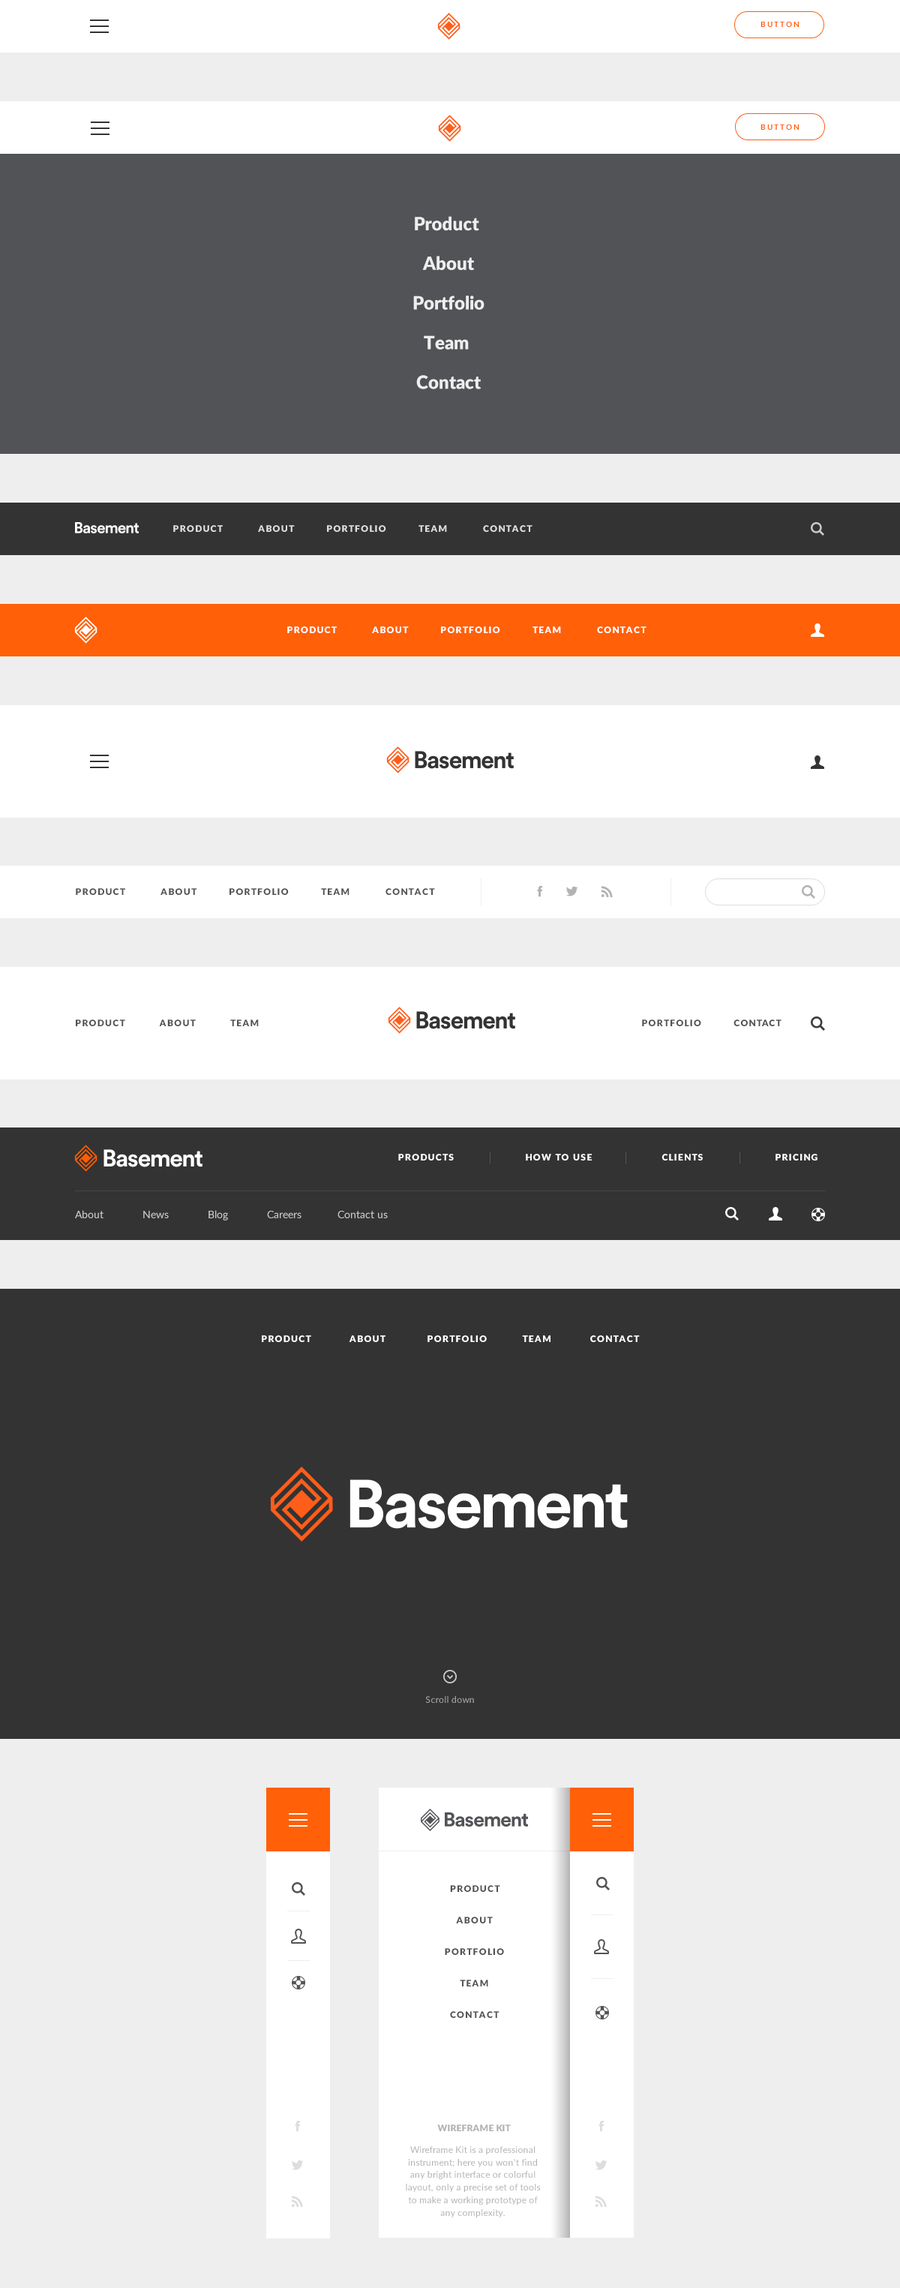
<style>
.page{position:relative;width:900px;height:2288px;background:#eeeeee}
.page>*{position:absolute;margin:0}
.t1{font:7.5px "Lato-Bold";letter-spacing:0.2em;color:#ff5c00}
.t2{font:7.5px "Lato-Bold";letter-spacing:0.2em;color:#ff5f00}
.t3{font:18px/39.6px "Lato-Black";color:#eeeeee}
.t4{font:9px "Lato-Black";letter-spacing:0.1em;color:#dddddd}
.t5{font:9px "Lato-Black";letter-spacing:0.1em;color:#ffffff}
.t6{font:9px "Lato-Black";letter-spacing:0.1em;color:#515356}
.t7{font:9px "Lato-Black";letter-spacing:0.1em;color:#515254}
.t8{font:10.5px "Lato-Regular";color:#cbcbcb}
.t9{font:9px "Lato-Regular";letter-spacing:0.02em;color:#a2a2a2}
.t10{font:9px/31.5px "Lato-Black";letter-spacing:0.1em;color:#515356}
.t11{font:9px "Lato-Black";color:#b2b2b2}
.t12{font:9px/12.6px "Lato-Regular";letter-spacing:0.02em;color:#b2b2b2}
</style>
<div class="page">
<p class="t1" style="left:760px;top:21px;width:39px;height:6px">BUTTON</p>
<p class="t2" style="left:760px;top:124px;width:39px;height:6px">BUTTON</p>
<p class="t3" style="left:413px;top:216px;width:71px;height:173px;text-align:center">Product<br> About<br> Portfolio<br>Team<br> Contact</p>
<p class="t4" style="left:173px;top:525px;width:359px;height:7px">PRODUCT           ABOUT          PORTFOLIO          TEAM           CONTACT</p>
<p class="t5" style="left:287px;top:626px;width:359px;height:7px">PRODUCT           ABOUT          PORTFOLIO          TEAM           CONTACT</p>
<p class="t6" style="left:76px;top:888px;width:359px;height:7px">PRODUCT           ABOUT          PORTFOLIO          TEAM           CONTACT</p>
<p class="t7" style="left:76px;top:1019px;width:183px;height:7px">PRODUCT           ABOUT           TEAM</p>
<p class="t7" style="left:642px;top:1019px;width:140px;height:7px">PORTFOLIO          CONTACT</p>
<p class="t5" style="left:398px;top:1154px;width:56px;height:6px">PRODUCTS</p>
<p class="t5" style="left:526px;top:1154px;width:66px;height:6px">HOW TO USE</p>
<p class="t5" style="left:662px;top:1154px;width:41px;height:6px">CLIENTS</p>
<p class="t5" style="left:776px;top:1154px;width:42px;height:6px">PRICING</p>
<p class="t8" style="left:75px;top:1210px;width:313px;height:10px">About             News             Blog             Careers            Contact us</p>
<p class="t5" style="left:262px;top:1335px;width:378px;height:7px">PRODUCT            ABOUT             PORTFOLIO           TEAM            CONTACT</p>
<p class="t9" style="left:425px;top:1696px;width:49px;height:6px">Scroll down</p>
<p class="t10" style="left:445px;top:1885px;width:59px;height:133px;text-align:center">PRODUCT<br>ABOUT<br>PORTFOLIO<br>TEAM<br>CONTACT</p>
<p class="t11" style="left:437px;top:2124px;width:74px;height:7px">WIREFRAME KIT</p>
<p class="t12" style="left:406px;top:2146px;width:135px;height:71px;text-align:center">Wireframe Kit is a professional instrument; here you won’t find any bright interface or colorful layout, only a precise set of tools to make a working prototype of any complexity.</p>
</div>
